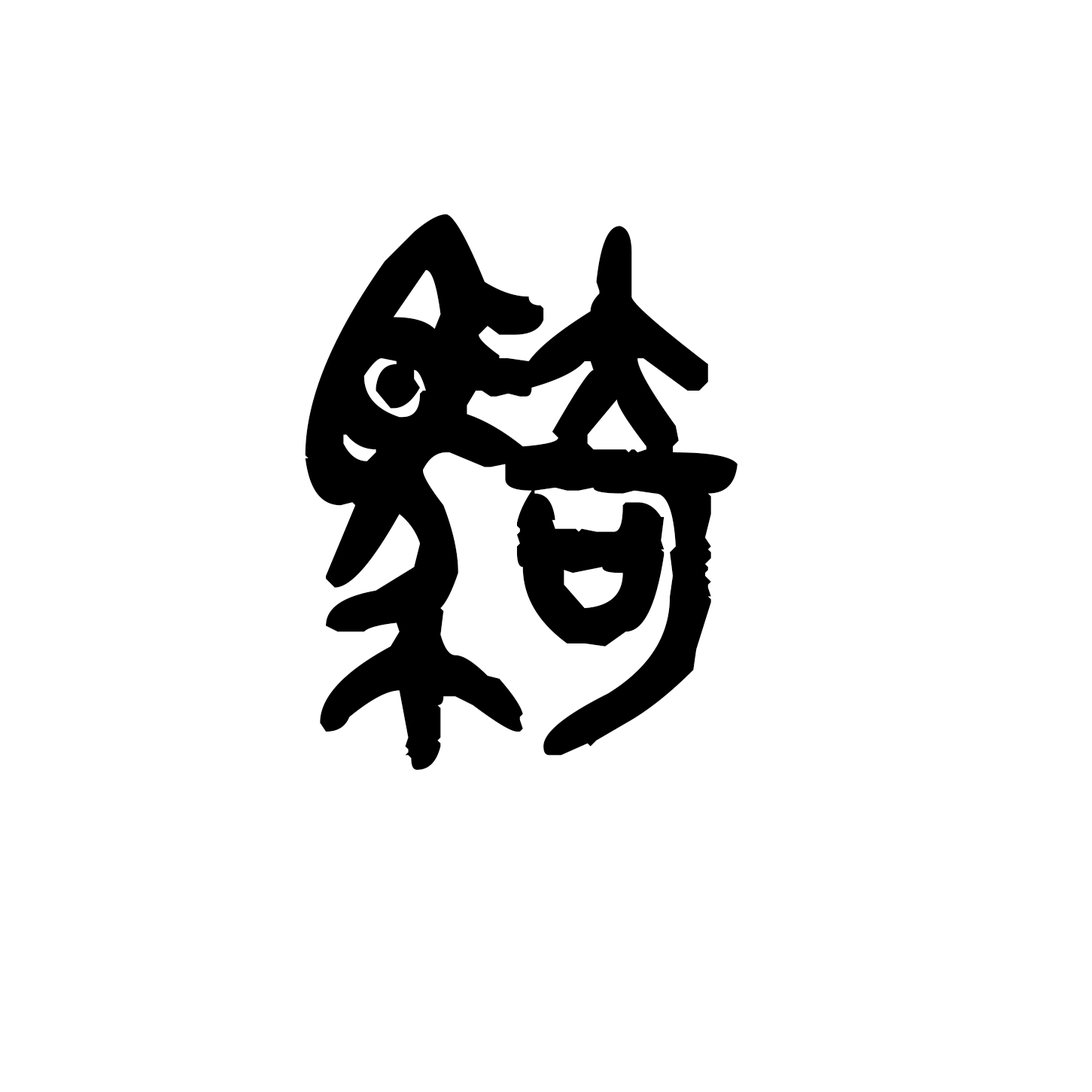
<style>
.page{position:relative;width:1092px;height:1092px;background:#ffffff}
.page>*{position:absolute;margin:0}
.t1{font:752.6px "½ðÎÄ´ó×­Ìå";color:#000000}
</style>
<div class="page">
<p class="t1" style="left:305px;top:214px;width:433px;height:556px">骑</p>
</div>
